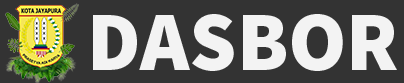
<style>
.page{position:relative;width:404px;height:83px;background:#333333}
.page>*{position:absolute;margin:0}
.t1{font:84px "SourceSansPro-Black";color:#f3f3f3;text-transform:uppercase}
</style>
<div class="page">
<p class="t1" style="left:93px;top:14px;width:304px;height:57px">DASBOR</p>
</div>
